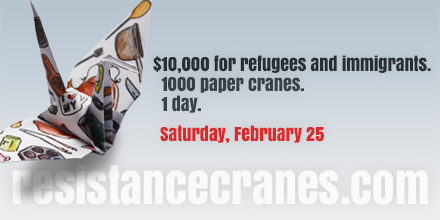
<style>
.page{position:relative;width:440px;height:220px}
.page>*{position:absolute;margin:0}
.t1{font:18px/18px "Anton";color:#282e34}
.t2{font:18px/18px "Anton";color:#393f44}
.t3{font:18px "Anton";color:#dd2929}
.t4{font:45.2px "Anton";color:#fafafa}
</style>
<div class="page">
<p class="t1" style="left:153px;top:55px;width:278px;height:58px">$10,000 for refugees and immigrants.<br><span class="t2">  1000 paper cranes.<br>  1 day.</span></p>
<p class="t3" style="left:160px;top:125px;width:164px;height:18px">Saturday, February 25</p>
<p class="t4" style="left:12px;top:165px;width:416px;height:40px">resistancecranes.com</p>
</div>
